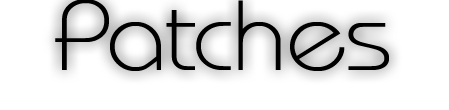
<style>
.page{position:relative;width:449px;height:110px;background:#ffffff}
.page>*{position:absolute;margin:0}
.t1{font:100px "MonaKo";color:#000000;scale:1.1 1}
</style>
<div class="page">
<p class="t1" style="left:55px;top:0px;width:334px;height:71px">Patches</p>
</div>
